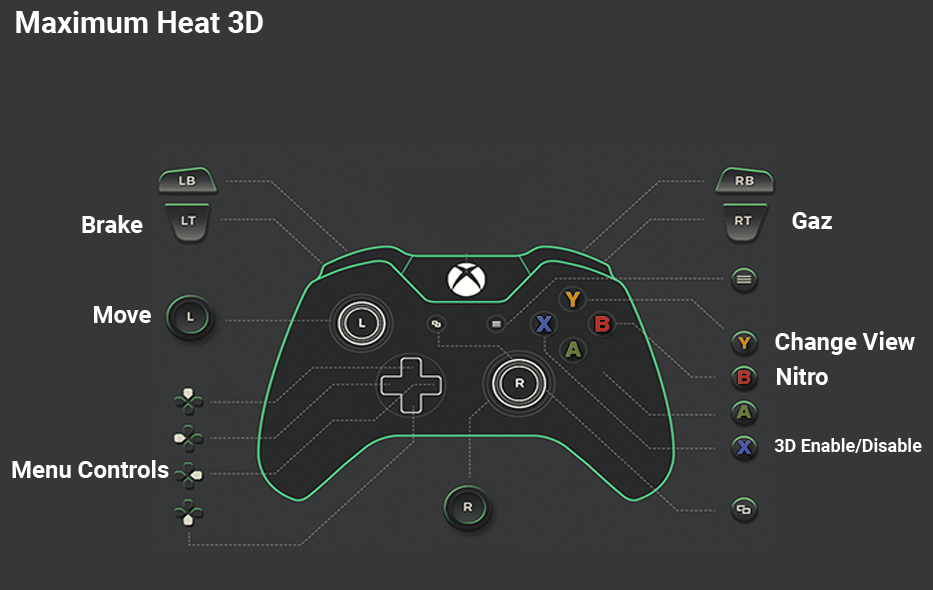
<style>
.page{position:relative;width:933px;height:590px;background:#363838}
.page>*{position:absolute;margin:0}
.t1{font:30px "Roboto-Bold";color:#ffffff}
.t2{font:24px "Roboto-Bold";color:#ffffff}
.t3{font:18px "Roboto-Bold";color:#ffffff}
</style>
<div class="page">
<p class="t1" style="left:16px;top:11px;width:247px;height:22px">Maximum Heat 3D</p>
<p class="t2" style="left:82px;top:215px;width:61px;height:18px">Brake</p>
<p class="t2" style="left:792px;top:212px;width:40px;height:17px">Gaz</p>
<p class="t2" style="left:94px;top:306px;width:57px;height:17px">Move</p>
<p class="t2" style="left:775px;top:331px;width:140px;height:24px">Change View</p>
<p class="t2" style="left:777px;top:366px;width:51px;height:19px">Nitro</p>
<p class="t3" style="left:774px;top:438px;width:148px;height:15px">3D Enable/Disable</p>
<p class="t2" style="left:12px;top:460px;width:157px;height:18px">Menu Controls</p>
</div>
